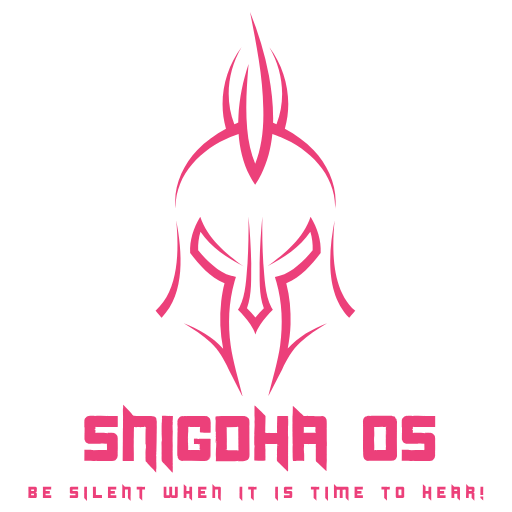
<style>
.page{position:relative;width:512px;height:512px;background:#ffffff}
.page>*{position:absolute;margin:0}
.t1{font:64.3px "Duplexide";color:#ec407a}
.t2{font:16px "Duplexide";letter-spacing:0.3em;color:#ec407a}
</style>
<div class="page">
<p class="t1" style="left:84px;top:404px;width:352px;height:69px">SNIGDHA OS</p>
<p class="t2" style="left:28px;top:483px;width:456px;height:18px">be silent when it is time to hear!</p>
</div>
